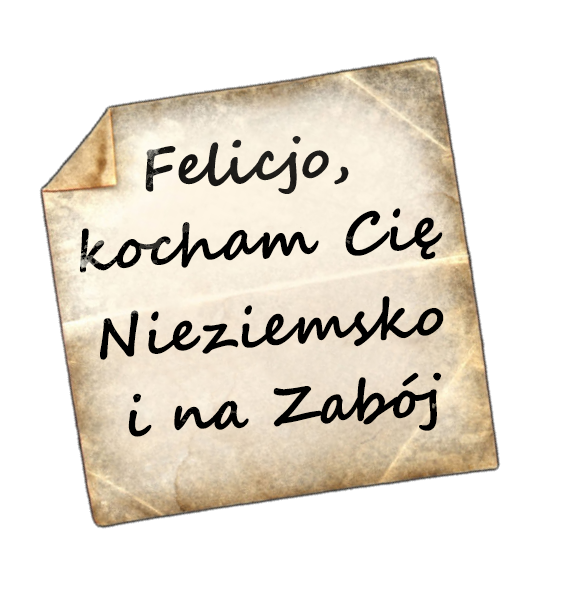
<style>
.page{position:relative;width:565px;height:600px;background:#ffffff}
.page>*{position:absolute;margin:0}
.t1{font:57px "SegoeScript-Bold";color:#1c1a18}
.t2{font:57px "SegoeScript-Bold";color:#000000}
</style>
<div class="page">
<p class="t1" style="left:145px;top:136px;width:204px;height:58px;rotate:-4deg">Felicjo,</p>
<p class="t2" style="left:80px;top:208px;width:363px;height:65px;rotate:-4deg">kocham Cię</p>
<p class="t2" style="left:100px;top:296px;width:344px;height:64px;rotate:-4deg">Nieziemsko</p>
<p class="t2" style="left:128px;top:372px;width:314px;height:65px;rotate:-4deg">i na Zabój</p>
</div>
